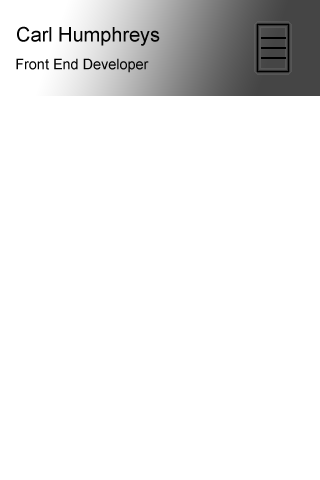
<style>
.page{position:relative;width:320px;height:480px;background:#ffffff}
.page>*{position:absolute;margin:0}
.t1{font:20.3px "ArialMT";color:#040404}
.t2{font:14.4px "ArialMT";color:#040404}
</style>
<div class="page">
<p class="t1" style="left:17px;top:26px;width:143px;height:20px">Carl Humphreys</p>
<p class="t2" style="left:16px;top:58px;width:133px;height:15px">Front End Developer</p>
</div>
